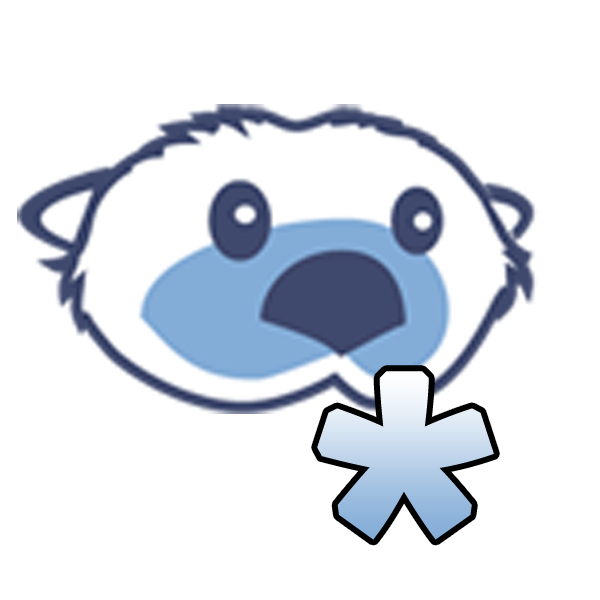
<style>
.page{position:relative;width:600px;height:600px;background:#ffffff}
.page>*{position:absolute;margin:0}
.t1{font:500px "ArialMT";letter-spacing:-0.09em;font-weight:bold}
</style>
<div class="page">
<p class="t1" style="left:317px;top:371px;width:177px;height:169px">*</p>
</div>
